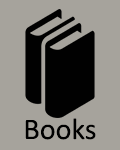
<style>
.page{position:relative;width:120px;height:150px;background:#a6a39c}
.page>*{position:absolute;margin:0}
.t1{font:30px "Calibri";color:#000000}
</style>
<div class="page">
<p class="t1" style="left:25px;top:118px;width:71px;height:22px">Books</p>
</div>
